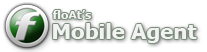
<style>
.page{position:relative;width:207px;height:52px;background:#ffffff}
.page>*{position:absolute;margin:0}
.t1{font:11px "Tahoma-Bold";color:#f2f2f2;scale:1.1 1}
.t2{font:20px "Tahoma-Bold";color:#f2f2f2;scale:1.1 1}
</style>
<div class="page">
<p class="t1" style="left:52px;top:10px;width:39px;height:9px">floAt’s</p>
<p class="t2" style="left:53px;top:23px;width:144px;height:20px">Mobile Agent</p>
</div>
